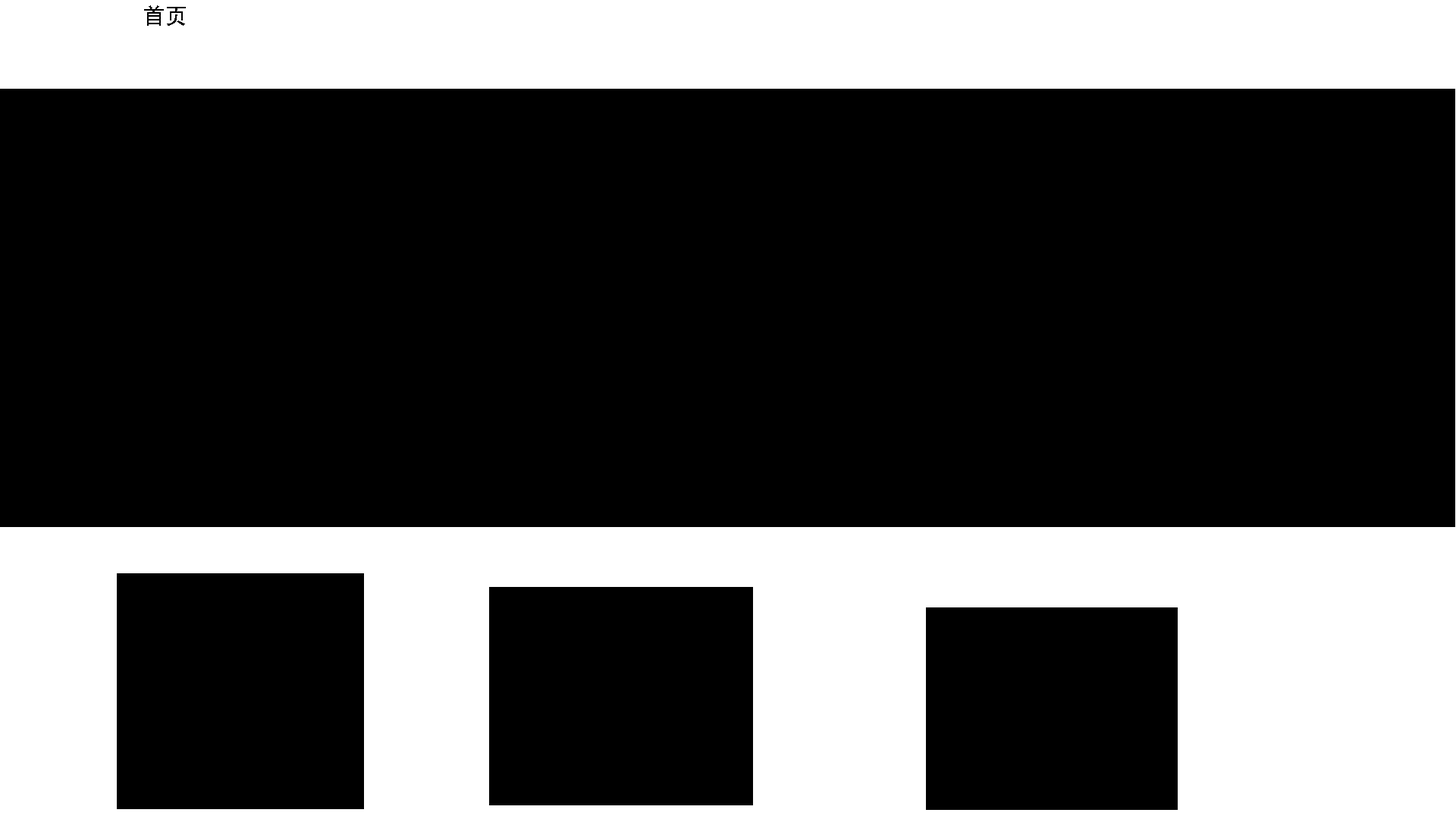
<style>
.page{position:relative;width:1456px;height:819px;background:#000000}
.page>*{position:absolute;margin:0}
.t1{font:22.7px "AdobeHeitiStd-Regular";color:#000000}
</style>
<div class="page">
<p class="t1" style="left:144px;top:5px;width:42px;height:21px">首页</p>
</div>
